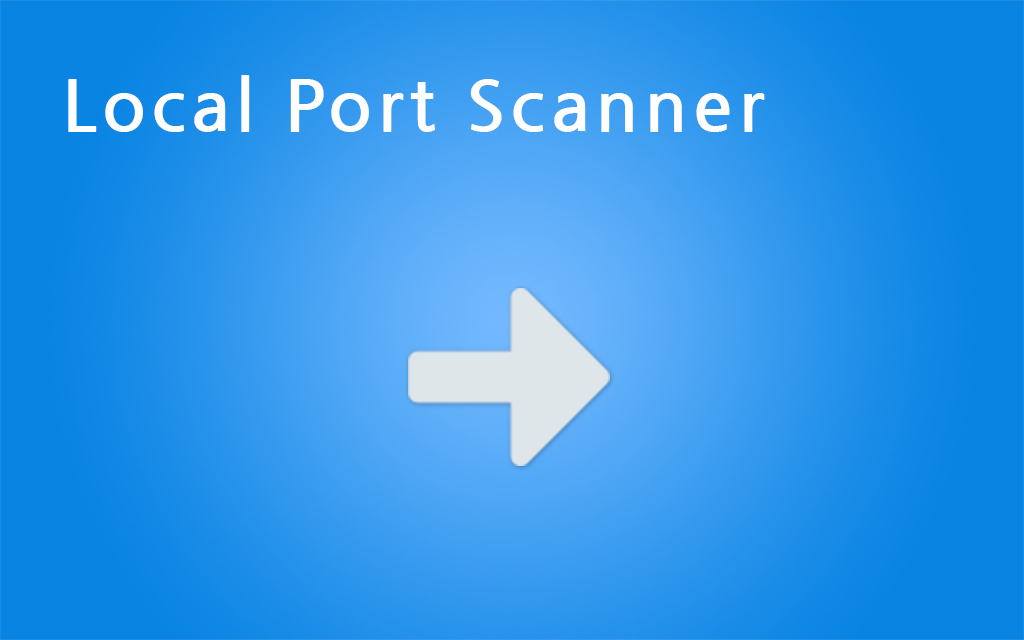
<style>
.page{position:relative;width:1024px;height:640px}
.page>*{position:absolute;margin:0}
.t1{font:72px "NanumGothicBold";letter-spacing:0.075em;color:#ffffff}
</style>
<div class="page">
<p class="t1" style="left:68px;top:75px;width:697px;height:57px">Local Port Scanner</p>
</div>
